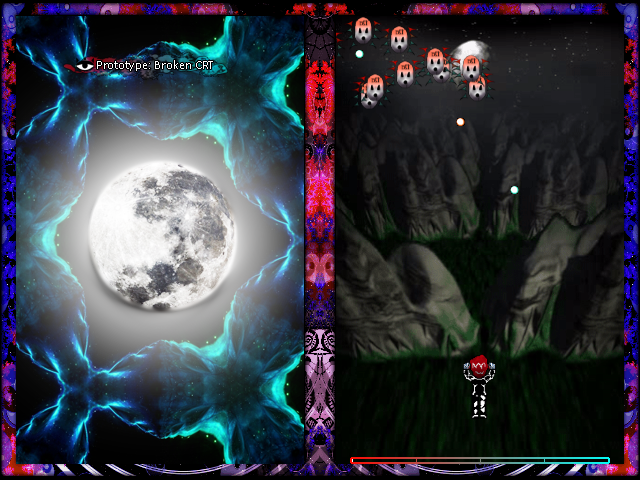
<style>
.page{position:relative;width:640px;height:480px}
.page>*{position:absolute;margin:0}
.t1{font:13.3px "Calibri";color:#ffffff}
</style>
<div class="page">
<p class="t1" style="left:97px;top:60px;width:116px;height:11px">Prototype: Broken CRT</p>
</div>
